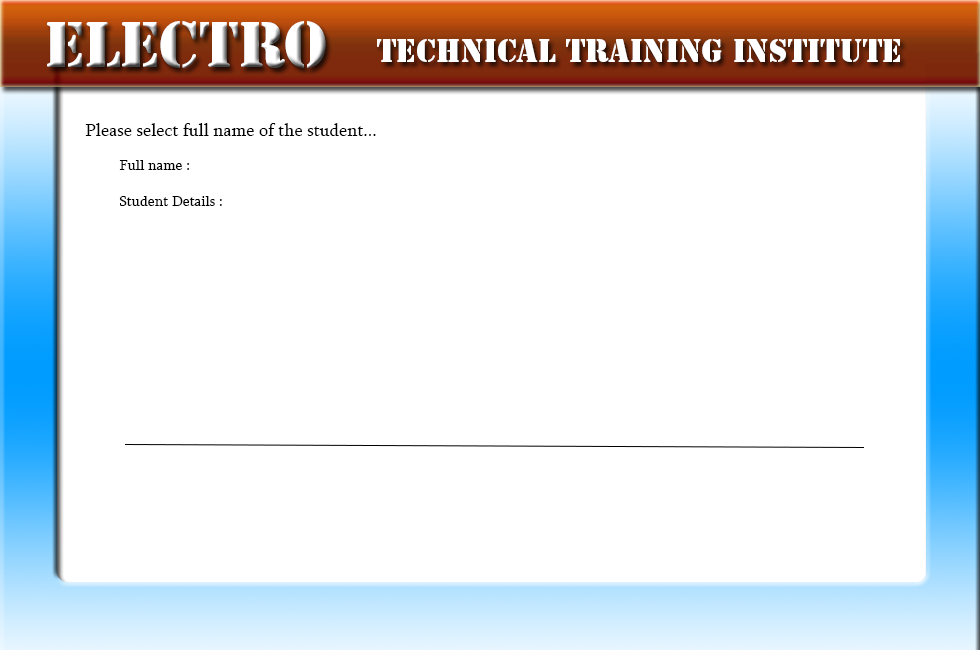
<style>
.page{position:relative;width:980px;height:650px;background:#ffffff}
.page>*{position:absolute;margin:0}
.t1{font:60px "StencilStd";color:#ffffff}
.t2{font:30px "StencilStd";color:#ffffff}
.t3{font:18px "Sylfaen";color:#000000}
.t4{font:15px "Sylfaen";color:#000000}
</style>
<div class="page">
<p class="t1" style="left:47px;top:21px;width:279px;height:47px">Electro</p>
<p class="t2" style="left:377px;top:39px;width:523px;height:23px">Technical Training Institute</p>
<p class="t3" style="left:85px;top:123px;width:291px;height:13px">Please select full name of the student...</p>
<p class="t4" style="left:119px;top:160px;width:103px;height:46px">Full name :<br><br>Student Details :</p>
</div>
